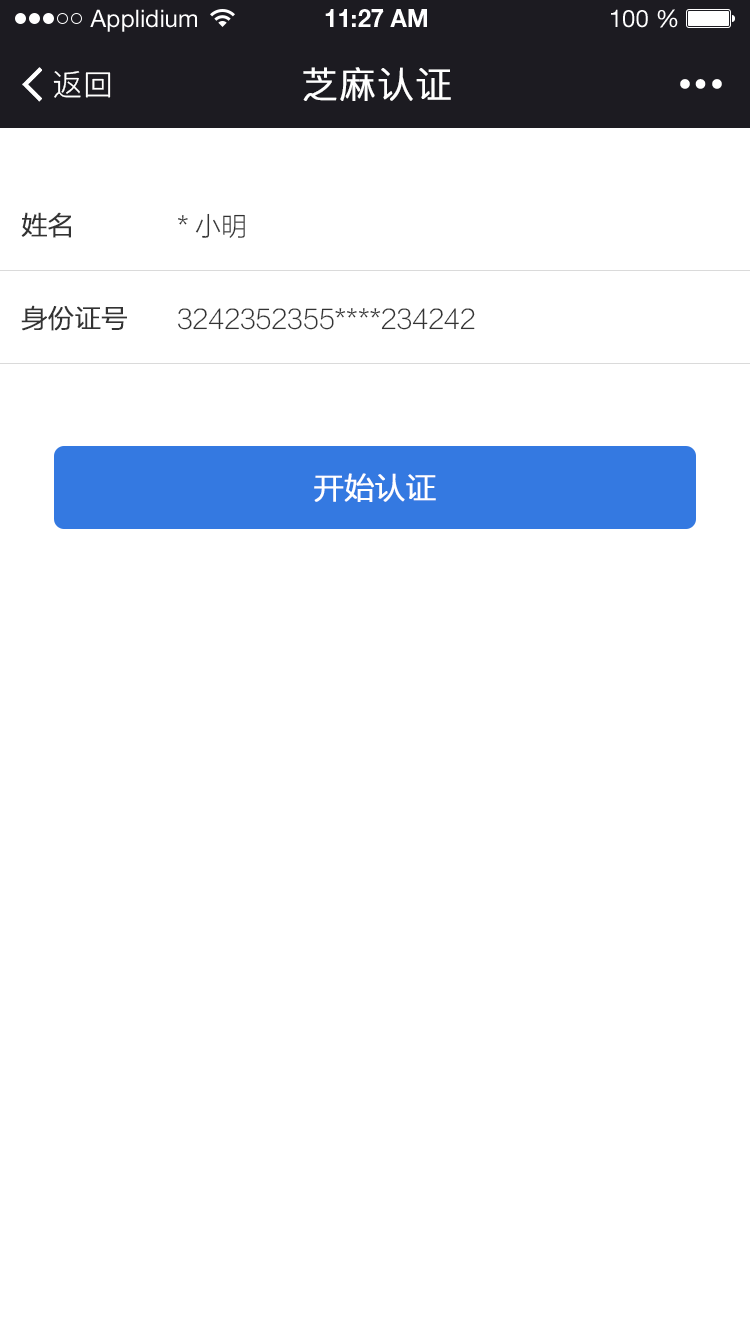
<style>
.page{position:relative;width:750px;height:1334px;background:#ffffff}
.page>*{position:absolute;margin:0}
.t1{font:24px "HelveticaNeueLTStd-Roman";color:#ffffff}
.t2{font:24px "HelveticaNeueLTStd-Bd";color:#ffffff}
.t3{font:30px "PingFang-SC-Regular";letter-spacing:0.025em;color:#ffffff}
.t4{font:36px "PingFang-SC-Regular";letter-spacing:0.025em;color:#ffffff;font-weight:bold}
.t5{font:26px "FZLTXHK--GBK1-0";color:#333333;font-weight:bold}
.t6{font:26px "FZLTXHK--GBK1-0";color:#333333}
.t7{font:30px "FZLTXHK--GBK1-0";color:#ffffff;font-weight:bold}
</style>
<div class="page">
<p class="t1" style="left:90px;top:9px;width:107px;height:23px">Applidium</p>
<p class="t2" style="left:325px;top:9px;width:102px;height:18px">11:27 AM</p>
<p class="t1" style="left:611px;top:9px;width:67px;height:19px">100 %</p>
<p class="t3" style="left:53px;top:71px;width:58px;height:27px">返回</p>
<p class="t4" style="left:303px;top:67px;width:148px;height:34px">芝麻认证</p>
<p class="t5" style="left:21px;top:212px;width:50px;height:26px">姓名</p>
<p class="t6" style="left:178px;top:213px;width:67px;height:25px">*小明</p>
<p class="t5" style="left:21px;top:305px;width:106px;height:26px">身份证号</p>
<p class="t6" style="left:178px;top:308px;width:297px;height:22px">3242352355****234242</p>
<p class="t7" style="left:314px;top:473px;width:122px;height:29px">开始认证</p>
</div>
